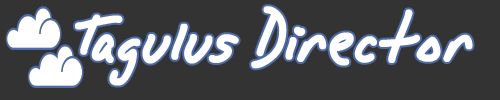
<style>
.page{position:relative;width:500px;height:100px;background:#333333}
.page>*{position:absolute;margin:0}
.t1{font:109px "AlphaMackAOE";color:#ffffff}
</style>
<div class="page">
<p class="t1" style="left:75px;top:6px;width:398px;height:80px">Tagulus Director</p>
</div>
